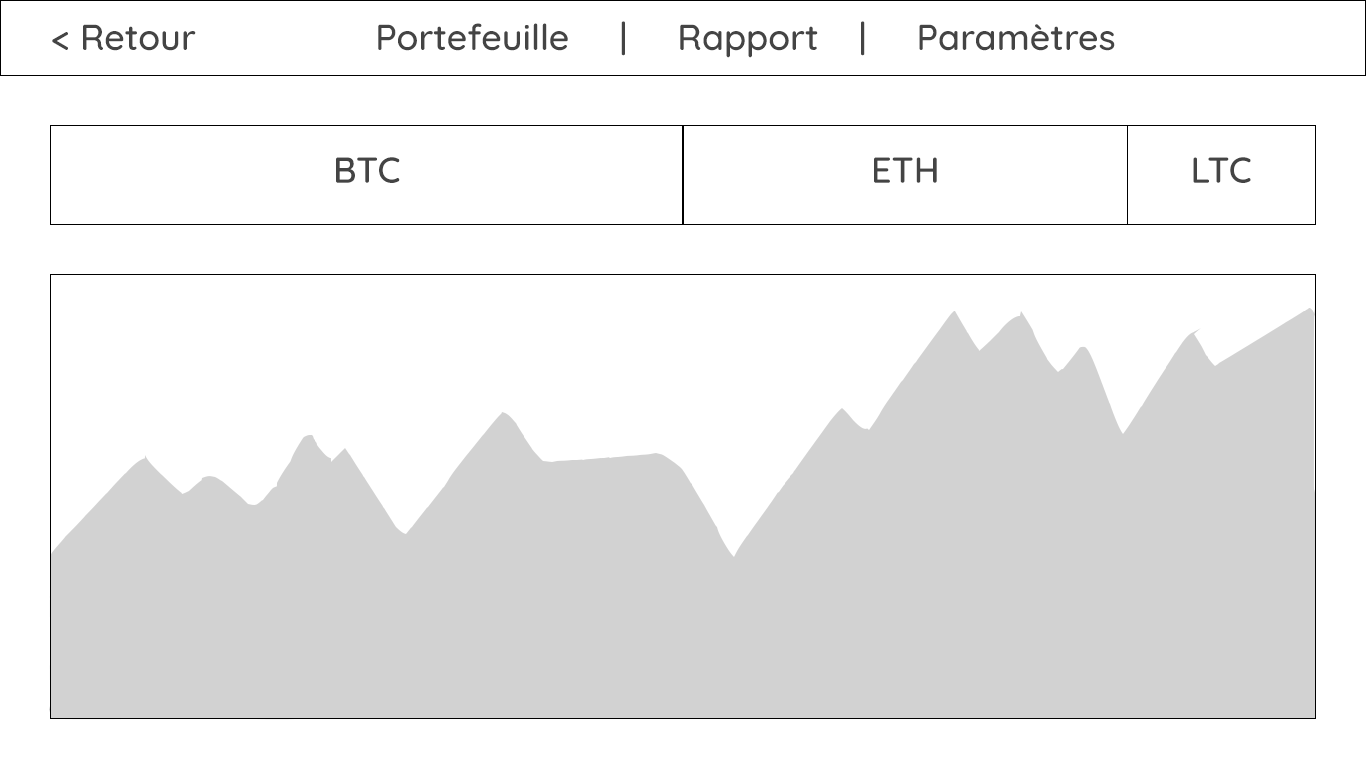
<style>
.page{position:relative;width:1366px;height:768px;background:#ffffff}
.page>*{position:absolute;margin:0}
.t1{font:36px "Quicksand-Medium";color:#444444}
</style>
<div class="page">
<p class="t1" style="left:52px;top:21px;width:1063px;height:37px">&lt; Retour                  Portefeuille     |     Rapport    |     Paramètres</p>
<p class="t1" style="left:336px;top:157px;width:64px;height:26px">BTC</p>
<p class="t1" style="left:874px;top:157px;width:63px;height:26px">ETH</p>
<p class="t1" style="left:1193px;top:157px;width:58px;height:26px">LTC</p>
</div>
